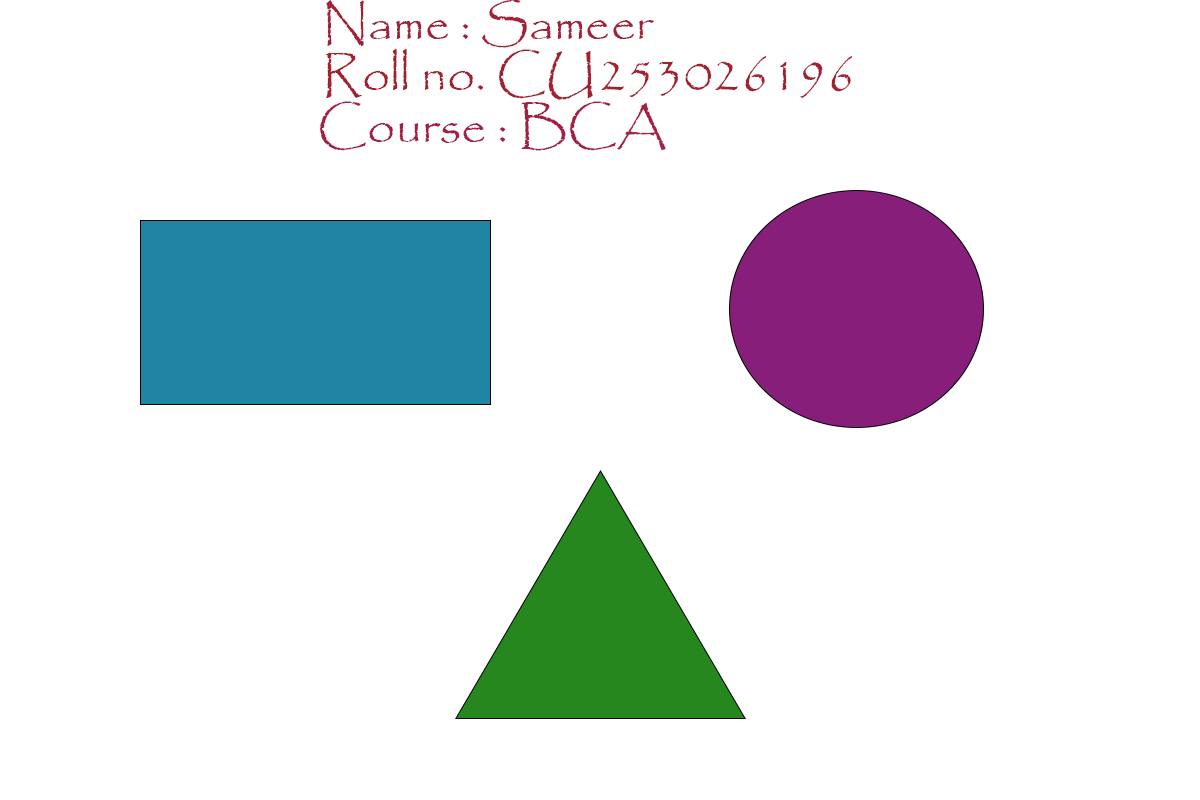
<style>
.page{position:relative;width:1200px;height:800px;background:#ffffff}
.page>*{position:absolute;margin:0}
.t1{font:49.1px "Papyrus-Regular";color:#a32039}
.t2{font:50px "Papyrus-Regular";color:#a32030}
.t3{font:50px "Papyrus-Regular";color:#a32045}
</style>
<div class="page">
<p class="t1" style="left:326px;top:0px;width:328px;height:48px">Name : Sameer</p>
<p class="t2" style="left:326px;top:48px;width:527px;height:52px">Roll no. CU253026196</p>
<p class="t3" style="left:320px;top:101px;width:346px;height:50px">Course : BCA</p>
</div>
